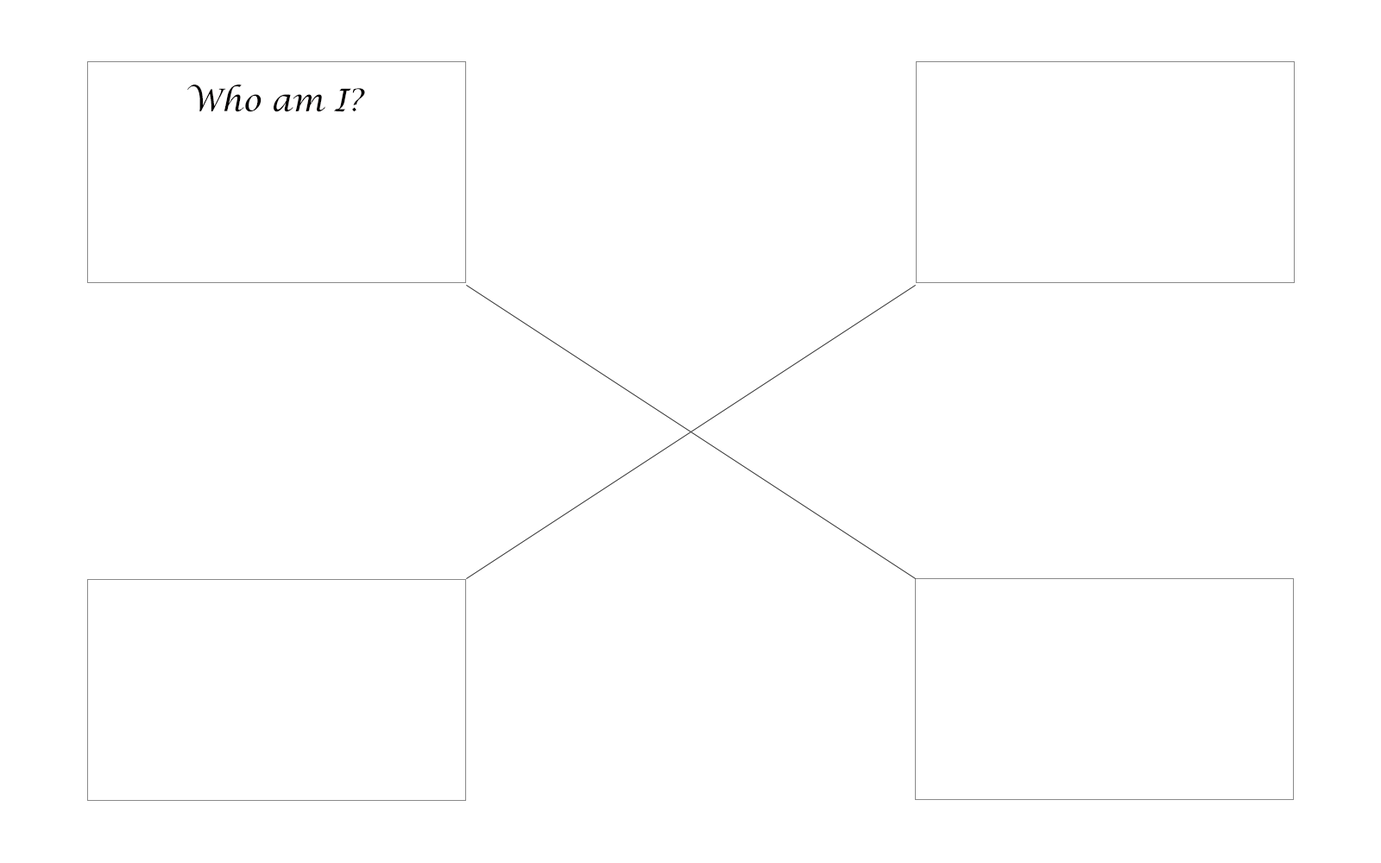
<style>
.page{position:relative;width:1381px;height:863px;background:#ffffff}
.page>*{position:absolute;margin:0}
.t1{font:31.1px "LucidaCalligraphy-Italic";color:#030000}
</style>
<div class="page">
<p class="t1" style="left:187px;top:85px;width:178px;height:27px">Who am I?</p>
</div>
